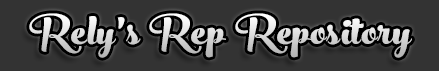
<style>
.page{position:relative;width:439px;height:71px;background:#333333}
.page>*{position:absolute;margin:0}
.t1{font:60px "PeachesandCream-Bold";letter-spacing:0.025em;color:#dddddd}
</style>
<div class="page">
<p class="t1" style="left:29px;top:13px;width:383px;height:45px">Rely’s Rep Repository</p>
</div>
